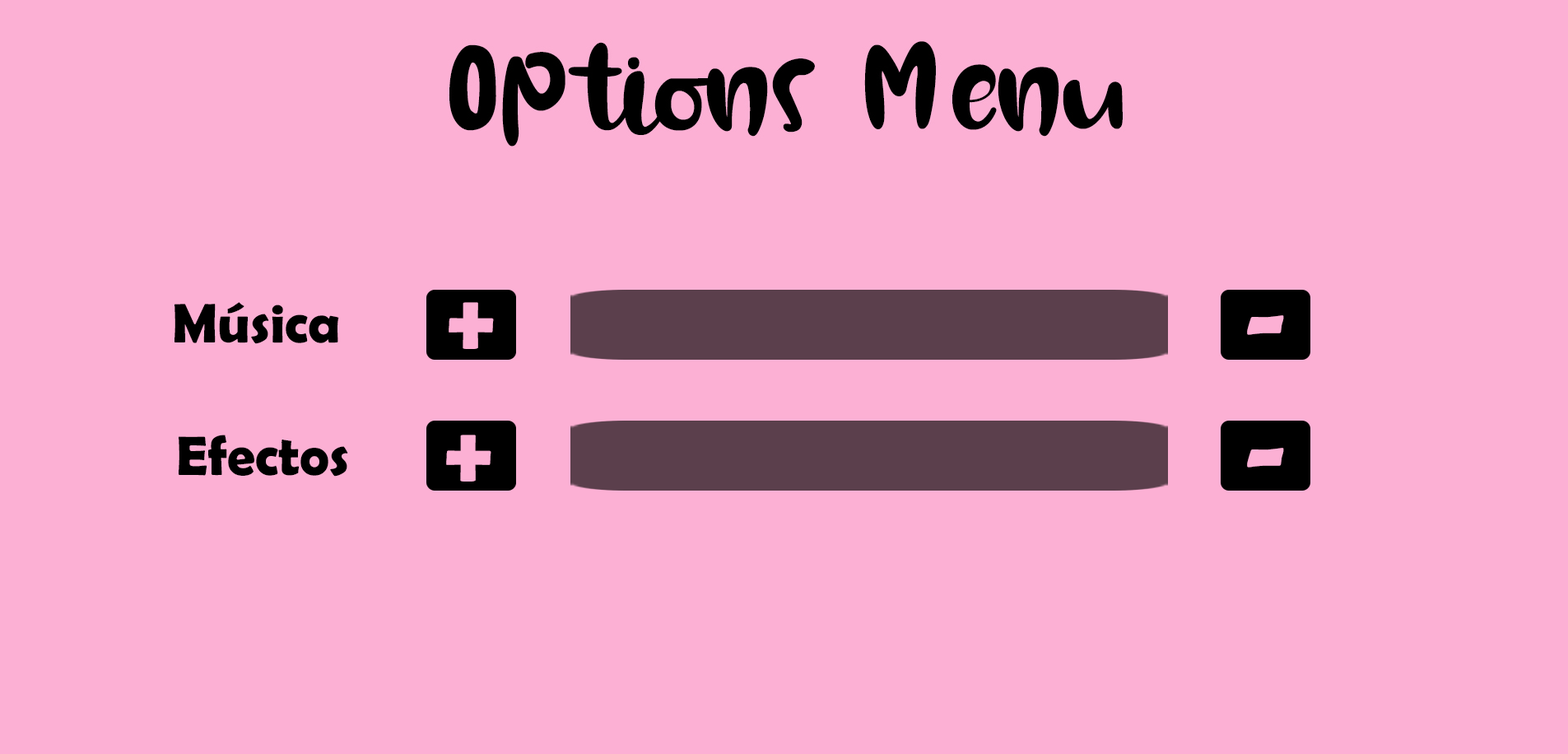
<style>
.page{position:relative;width:1568px;height:754px;background:#fcb0d4}
.page>*{position:absolute;margin:0}
.t1{font:55.8px "BerlinSansFBDemi-Bold";color:#000000}
.t2{font:102.1px "BerlinSansFBDemi-Bold";color:#fcb0d4}
</style>
<div class="page">
<p class="t1" style="left:174px;top:302px;width:165px;height:42px">Música</p>
<p class="t2" style="left:449px;top:302px;width:45px;height:47px">+</p>
<p class="t2" style="left:1247px;top:315px;width:37px;height:20px">-</p>
<p class="t1" style="left:179px;top:435px;width:169px;height:42px">Efectos</p>
<p class="t2" style="left:446px;top:435px;width:45px;height:47px">+</p>
<p class="t2" style="left:1247px;top:448px;width:37px;height:20px">-</p>
</div>
